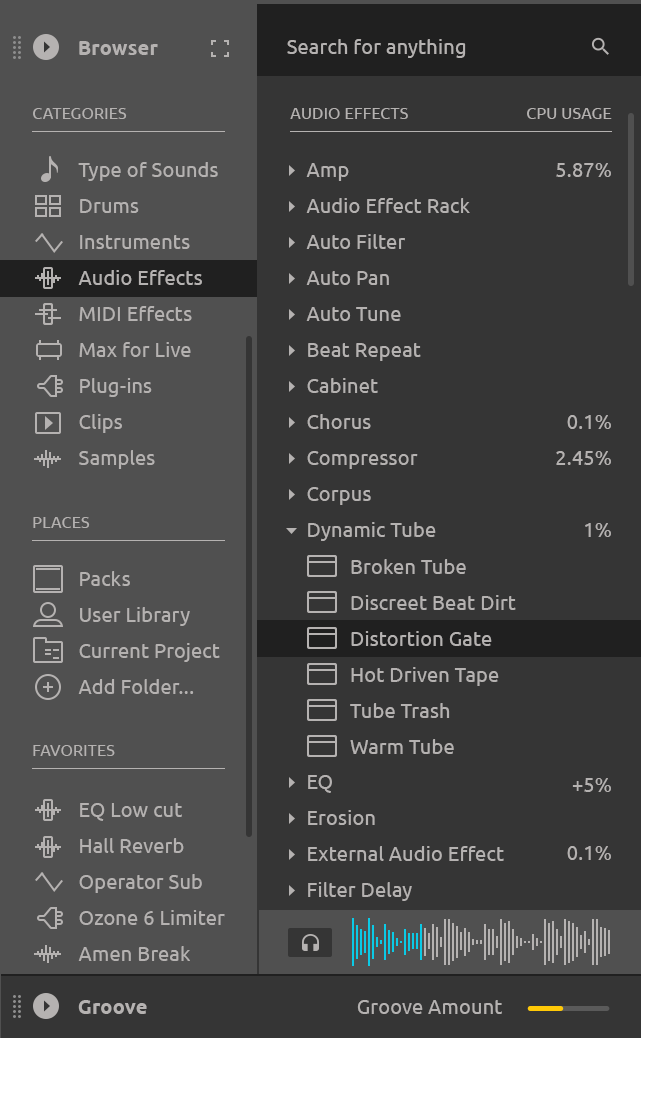
<style>
.page{position:relative;width:649px;height:1112px;background:#353535}
.page>*{position:absolute;margin:0}
.t1{font:20px "Ubuntu-Bold";letter-spacing:0.01em;color:#b5b2b1}
.t2{font:20px "Ubuntu";letter-spacing:0.01em;color:#b5b2b1}
.t3{font:16px "Ubuntu";letter-spacing:0.01em;color:#b5b2b1;text-transform:uppercase}
.t4{font:20px/36px "Ubuntu";letter-spacing:0.01em;color:#b5b2b1}
</style>
<div class="page">
<p class="t1" style="left:79px;top:41px;width:79px;height:14px">Browser</p>
<p class="t2" style="left:287px;top:39px;width:179px;height:19px">Search for anything</p>
<p class="t3" style="left:33px;top:108px;width:94px;height:11px">Categories</p>
<p class="t3" style="left:290px;top:108px;width:118px;height:11px">Audio Effects</p>
<p class="t3" style="left:527px;top:108px;width:85px;height:11px">CPU USAGE</p>
<p class="t4" style="left:78px;top:162px;width:140px;height:307px">Type of Sounds<br>Drums<br>Instruments<br>Audio Effects<br>MIDI Effects<br>Max for Live<br>Plug-ins<br>Clips<br>Samples</p>
<p class="t4" style="left:306px;top:163px;width:198px;height:842px">Amp<br>Audio Effect Rack<br>Auto Filter<br>Auto Pan<br>Auto Tune<br>Beat Repeat<br>Cabinet<br>Chorus<br>Compressor<br>Corpus<br>Dynamic Tube<br><br><br><br><br><br><br>EQ<br>Erosion<br>External Audio Effect<br>Filter Delay<br>Flanger<br>Frequency Shifter<br>Gate<br>Glue Compressor<br>Grain Delay<br>Limiter<br>Looper<br>Multiband Distorsion<br>Multiband Dynamics<br>Overdrive<br>Phaser<br>Ping Pong Delay<br>Redux<br>Resonators<br>Reverb<br>Saturator<br>Simple Delay<br>Spectrum<br>Stereo Imager<br>Transient Designer<br>Utility<br>Vinyl Distorsion<br>Vocoder</p>
<p class="t2" style="left:556px;top:163px;width:55px;height:14px">5.87%</p>
<p class="t2" style="left:567px;top:415px;width:44px;height:14px">0.1%</p>
<p class="t2" style="left:556px;top:451px;width:55px;height:14px">2.45%</p>
<p class="t3" style="left:33px;top:517px;width:57px;height:11px">Places</p>
<p class="t2" style="left:585px;top:523px;width:26px;height:14px">1%</p>
<p class="t4" style="left:350px;top:559px;width:166px;height:195px">Broken Tube<br> Discreet Beat Dirt<br> Distortion Gate<br> Hot Driven Tape<br> Tube Trash<br> Warm Tube</p>
<p class="t4" style="left:78px;top:571px;width:142px;height:123px">Packs<br>User Library<br>Current Project<br>Add Folder...</p>
<p class="t3" style="left:33px;top:745px;width:82px;height:11px">Favorites</p>
<p class="t2" style="left:572px;top:778px;width:39px;height:14px">+5%</p>
<p class="t4" style="left:78px;top:803px;width:147px;height:194px">EQ Low cut<br>Hall Reverb<br>Operator Sub<br>Ozone 6 Limiter<br>Amen Break<br>Add Favorite...</p>
<p class="t2" style="left:567px;top:846px;width:44px;height:14px">0.1%</p>
<p class="t1" style="left:78px;top:1000px;width:69px;height:14px">Groove</p>
<p class="t2" style="left:357px;top:1000px;width:145px;height:14px">Groove Amount</p>
</div>
